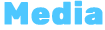
<style>
.page{position:relative;width:105px;height:30px;background:#ffffff}
.page>*{position:absolute;margin:0}
.t1{font:31.4px "Rubik-ExtraBold";letter-spacing:0.02em;color:#4ec7ff;font-weight:bold}
</style>
<div class="page">
<p class="t1" style="left:4px;top:0px;width:99px;height:25px">Media</p>
</div>
